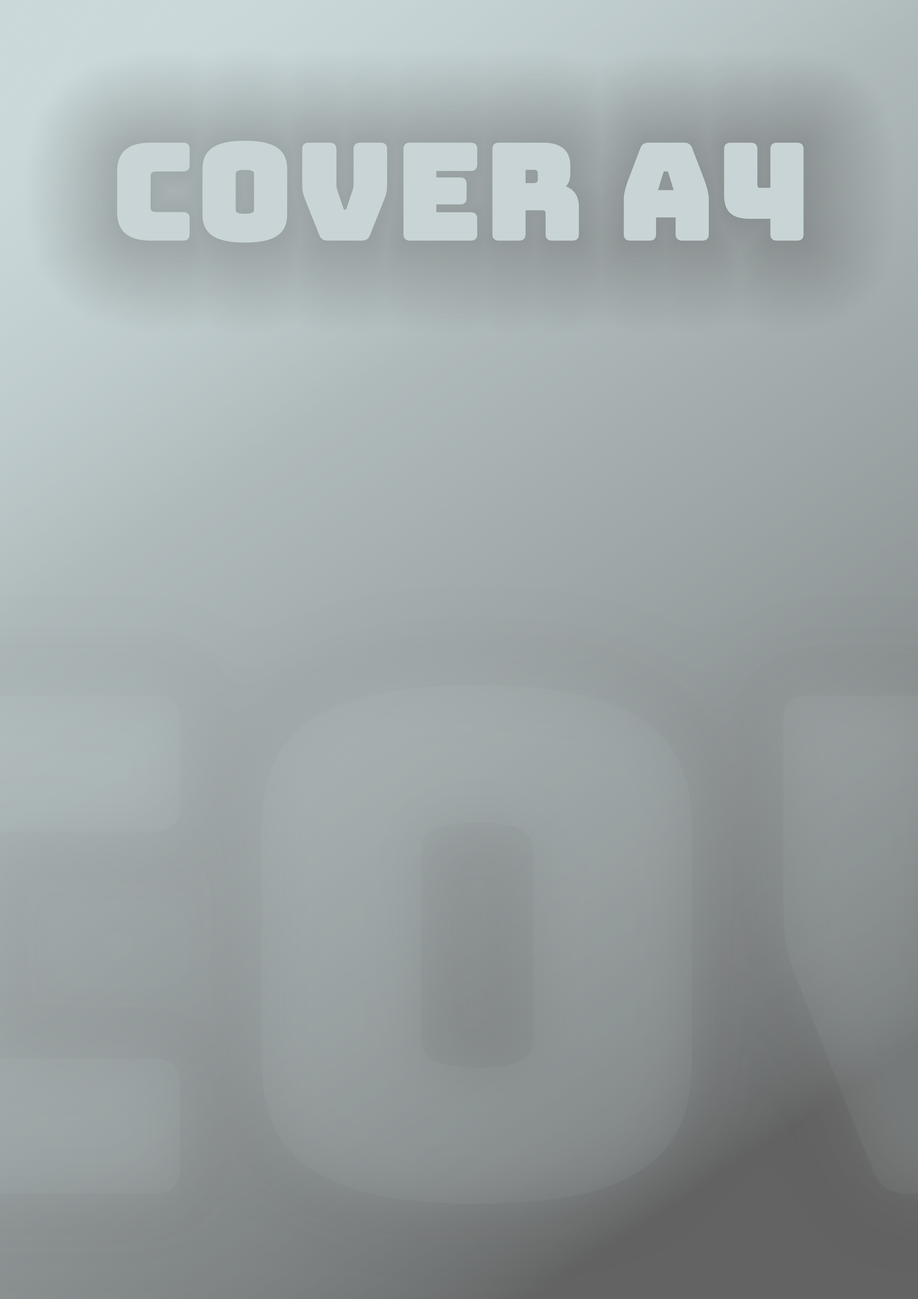
<style>
.page{position:relative;width:918px;height:1299px}
.page>*{position:absolute;margin:0}
.t1{font:131.1px "Bungee-Regular";color:#c8d4d5;font-weight:bold}
</style>
<div class="page">
<p class="t1" style="left:117px;top:141px;width:687px;height:102px">Cover A4</p>
</div>
